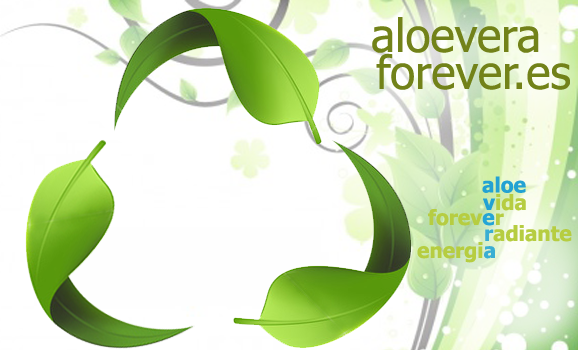
<style>
.page{position:relative;width:578px;height:350px;background:#ffffff}
.page>*{position:absolute;margin:0}
.t1{font:45.8px "Tahoma";color:#728219}
.t2{font:20.8px "Tahoma-Bold";color:#22a2d3}
.t3{font:20.8px "Tahoma-Bold";color:#b6cd41}
.t4{font:20.8px "Tahoma-Bold";color:#25a5d6}
.t5{font:20.8px "Tahoma-Bold";color:#3aaed3}
</style>
<div class="page">
<p class="t1" style="left:372px;top:17px;width:167px;height:36px">aloevera</p>
<p class="t1" style="left:376px;top:53px;width:194px;height:37px">forever.es</p>
<p class="t2" style="left:482px;top:176px;width:44px;height:17px">aloe</p>
<p class="t3" style="left:483px;top:194px;width:43px;height:17px"><span class="t2">v</span>ida</p>
<p class="t3" style="left:428px;top:209px;width:76px;height:17px">forev<span class="t4">e</span>r</p>
<p class="t3" style="left:485px;top:225px;width:87px;height:17px"><span class="t5">r</span>adiante</p>
<p class="t3" style="left:417px;top:242px;width:78px;height:21px">energi<span class="t5">a</span></p>
</div>
